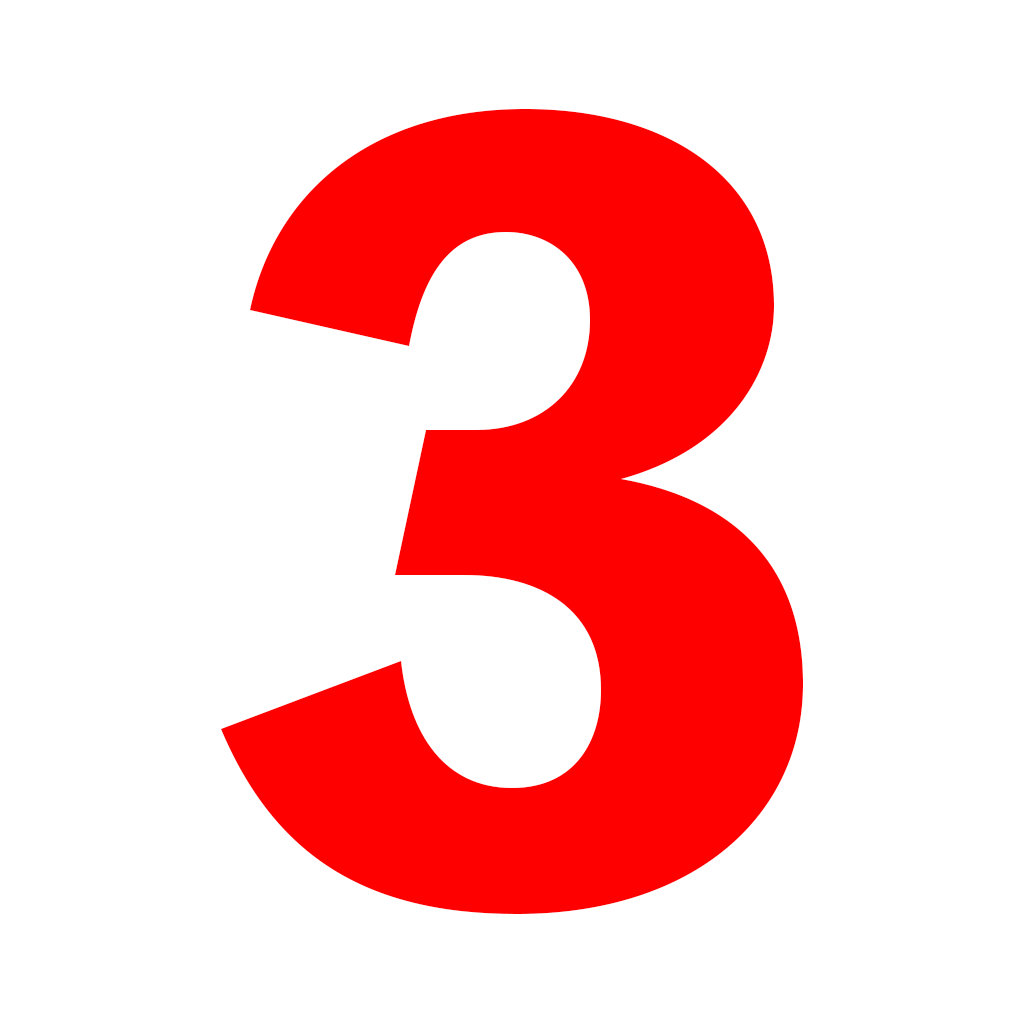
<style>
.page{position:relative;width:1024px;height:1024px;background:#ffffff}
.page>*{position:absolute;margin:0}
.t1{font:1000px "ToppanBunkyuMidashiGothicStdN-ExtraBold";color:#ff0000}
</style>
<div class="page">
<p class="t1" style="left:221px;top:109px;width:582px;height:805px">3</p>
</div>
